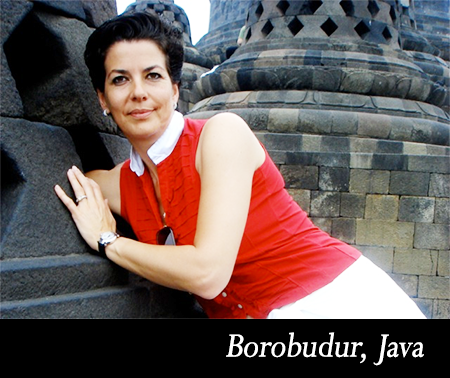
<style>
.page{position:relative;width:450px;height:378px}
.page>*{position:absolute;margin:0}
.t1{font:38px "Perpetua";letter-spacing:-0.025em;color:#ffffff;font-weight:bold;font-style:italic;scale:0.9 1}
</style>
<div class="page">
<p class="t1" style="left:226px;top:332px;width:198px;height:34px">Borobudur, Java</p>
</div>
